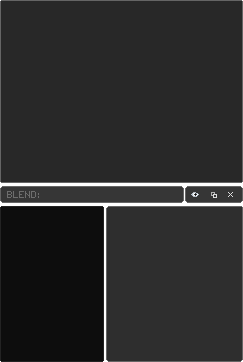
<style>
.page{position:relative;width:243px;height:362px;background:#282828}
.page>*{position:absolute;margin:0}
.t1{font:8px "Fixedv01";color:#6d6d6d}
</style>
<div class="page">
<p class="t1" style="left:7px;top:191px;width:32px;height:7px">BLEND:</p>
</div>
